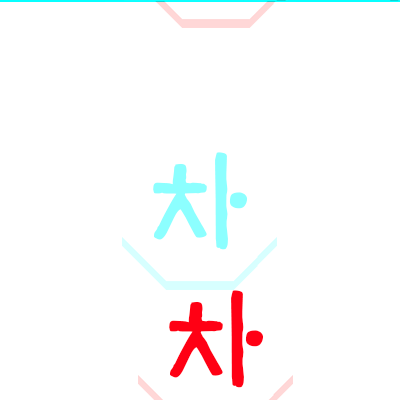
<style>
.page{position:relative;width:400px;height:400px;background:#ffffff}
.page>*{position:absolute;margin:0}
.t1{font:112px "MHunmin";color:#8cffff}
</style>
<div class="page">
<p class="t1" style="left:153px;top:150px;width:95px;height:98px">차</p>
</div>
